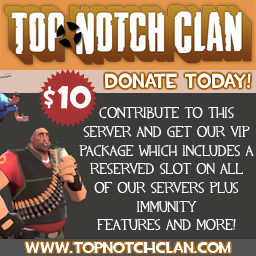
<style>
.page{position:relative;width:256px;height:256px;background:#3c3b37}
.page>*{position:absolute;margin:0}
.t1{font:20.7px "TF2Build";color:#fdfcfb;scale:0.9 1}
.t2{font:33.3px "TF2Build";color:#fdfcfb}
.t3{font:15.6px "TF2";color:#ffffff}
.t4{font:15.6px "TF2Build";color:#ffffff}
</style>
<div class="page">
<p class="t1" style="left:105px;top:73px;width:146px;height:16px">Donate Today!</p>
<p class="t2" style="left:43px;top:85px;width:48px;height:24px">$10</p>
<p class="t3" style="left:79px;top:107px;width:175px;height:124px;text-align:center">Contribute to this server and get our VIP package which includes a<br>reserved slot on all <br>of our servers plus <br>immunity <br>features and more!</p>
<p class="t4" style="left:25px;top:242px;width:206px;height:11px">www.topnotchclan.com</p>
</div>
